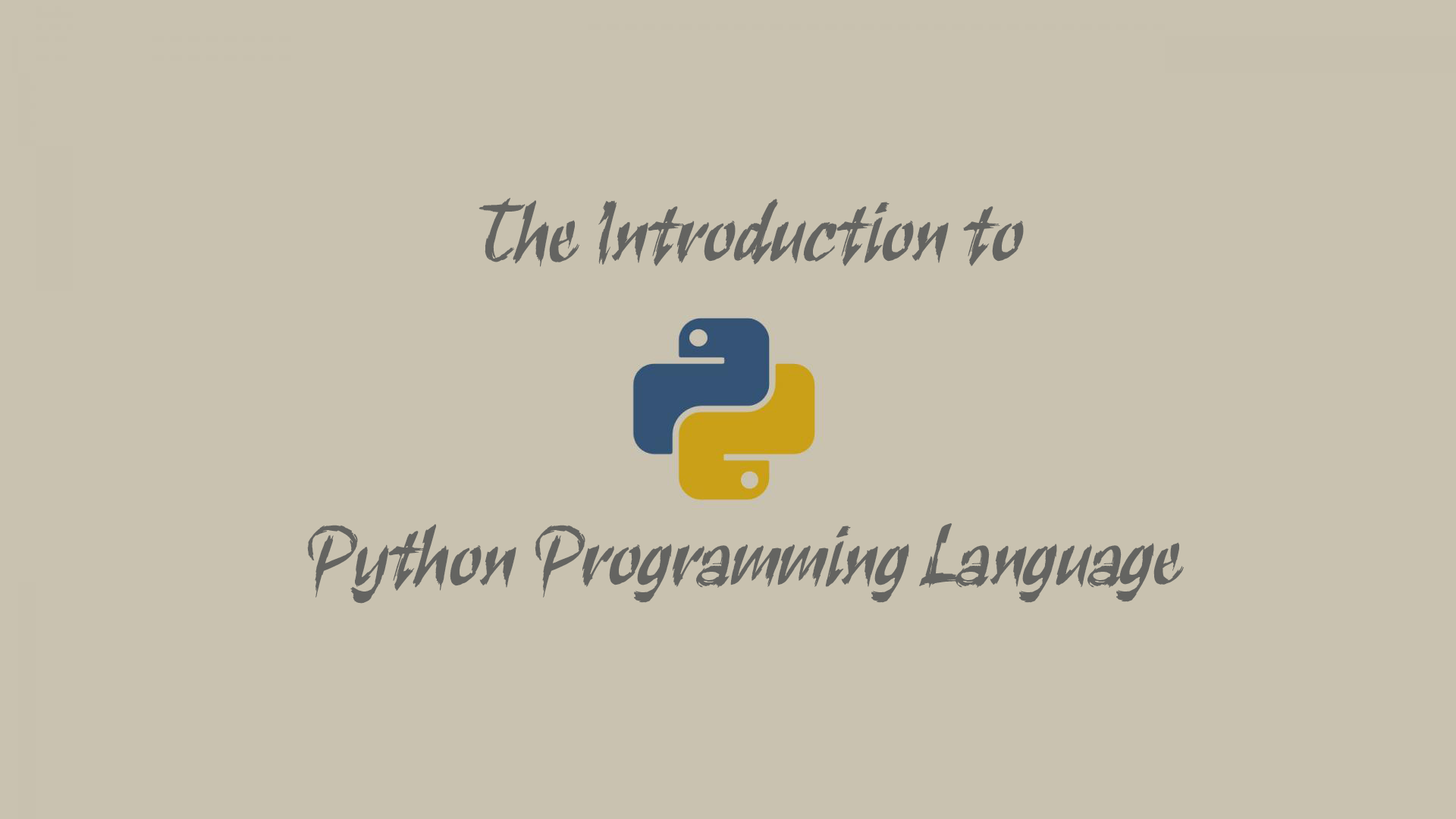
<style>
.page{position:relative;width:1456px;height:819px;background:#c9c2b0}
.page>*{position:absolute;margin:0}
.t1{font:90px "RuachLetPlain";color:#646461;scale:0.79 1}
</style>
<div class="page">
<p class="t1" style="left:307px;top:197px;width:877px;height:407px;text-align:center">The Introduction to<br><br> <br>Python Programming Language</p>
</div>
